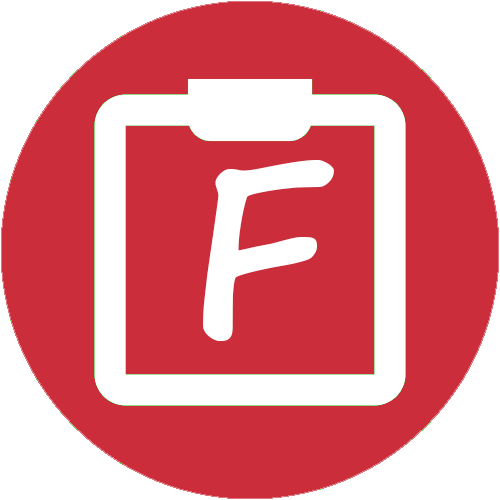
<style>
.page{position:relative;width:500px;height:500px;background:#cc2d3b}
.page>*{position:absolute;margin:0}
.t1{font:233.3px "SegoeScript-Bold";color:#ffffff}
</style>
<div class="page">
<p class="t1" style="left:203px;top:160px;width:131px;height:181px">F</p>
</div>
